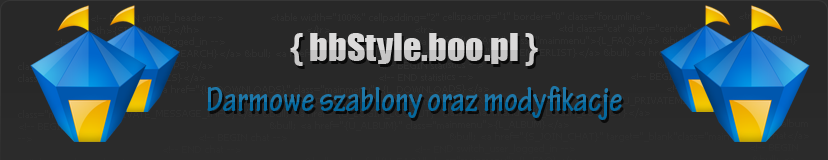
<style>
.page{position:relative;width:828px;height:160px;background:#282828}
.page>*{position:absolute;margin:0}
.t1{font:36px "Impact";color:#c7c6c6}
.t2{font:36px "TektonPro-BoldCond"}
</style>
<div class="page">
<p class="t1" style="left:290px;top:33px;width:248px;height:33px">{ bbStyle.boo.pl }</p>
<p class="t2" style="left:207px;top:86px;width:415px;height:34px">Darmowe szablony oraz modyfikacje</p>
</div>
